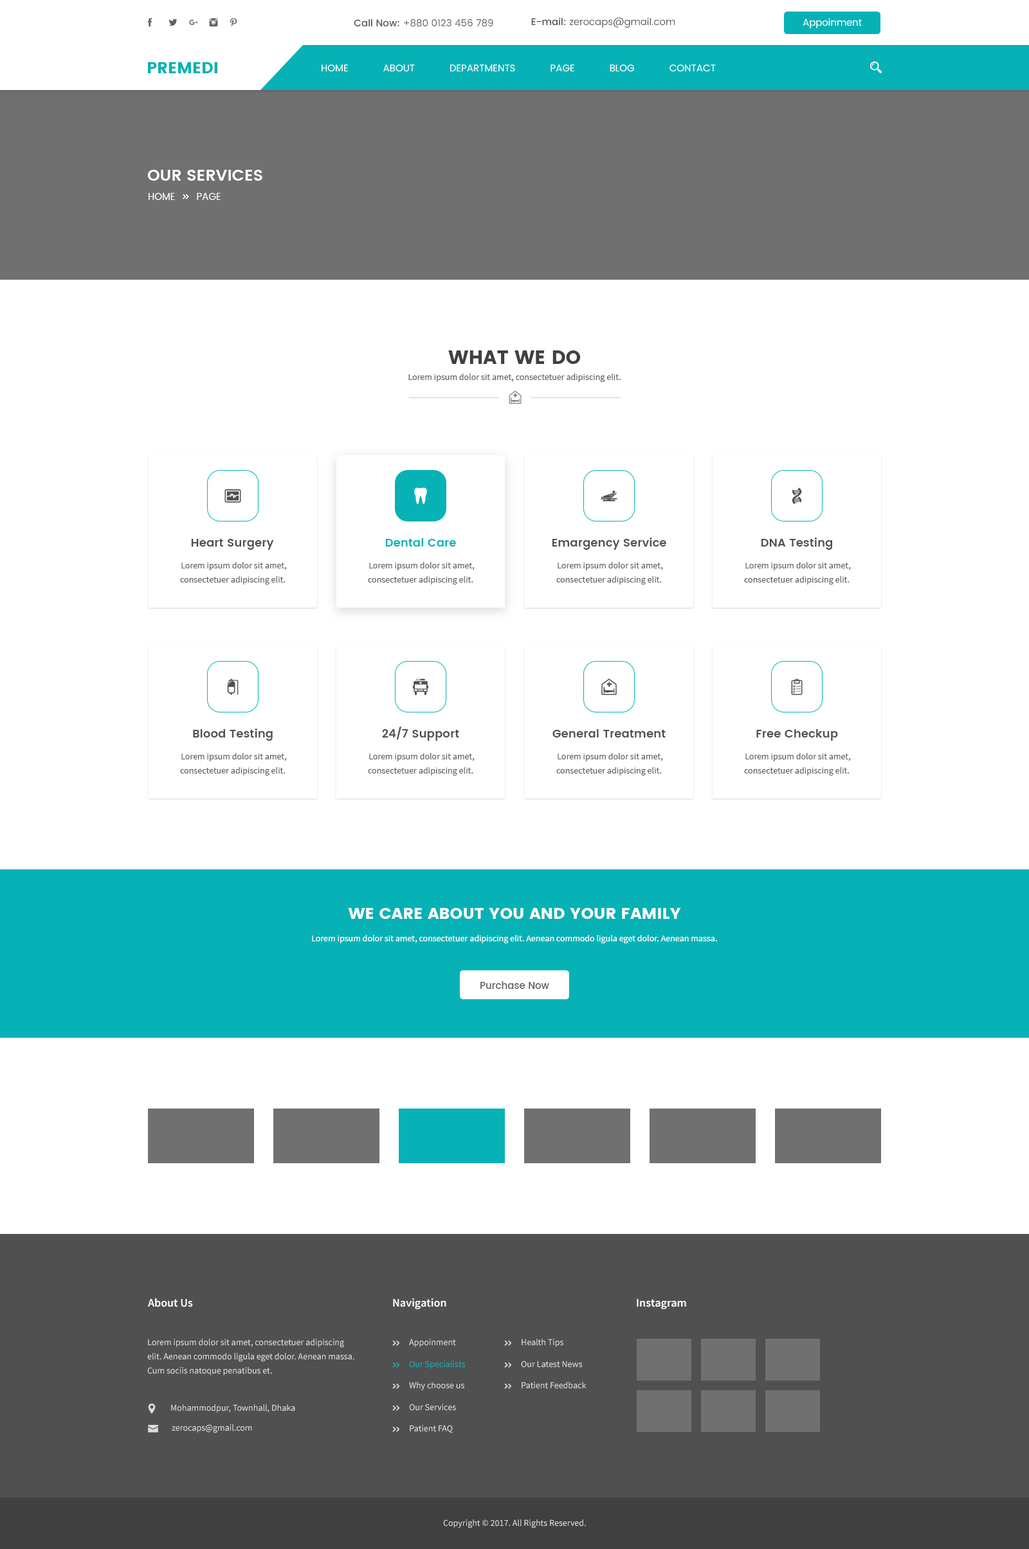
<style>
.page{position:relative;width:1029px;height:1549px;background:#ffffff}
.page>*{position:absolute;margin:0}
.t1{font:9.6px "Poppins-Regular";color:#606060}
.t2{font:9.6px "Poppins-Medium";color:#505050}
.t3{font:9.6px "Poppins-Regular";color:#fffefe}
.t4{font:16.1px "Poppins";color:#06b2b6}
.t5{font:9.6px "Poppins-Regular";color:#ffffff}
.t6{font:16.1px "Poppins-SemiBold";color:#ffffff}
.t7{font:19.3px "Poppins";color:#404040;text-transform:uppercase}
.t8{font:9px "SourceSansPro-Regular";color:#606060}
.t9{font:11.6px "Poppins-SemiBold";color:#505050}
.t10{font:11.6px "Poppins-SemiBold";color:#06b2b6}
.t11{font:9px/14.1px "SourceSansPro-Regular";color:#606060}
.t12{font:16.1px "Poppins";color:#ffffff;text-transform:uppercase}
.t13{font:9px "SourceSansPro-Regular";color:#ffffff}
.t14{font:9.6px "Poppins-Medium";color:#606060}
.t15{font:11.6px "SourceSansPro-Semibold";color:#ffffff}
.t16{font:9px/14.1px "SourceSansPro-Regular";color:#dddddd}
.t17{font:9px "SourceSansPro-Regular";color:#dddddd}
.t18{font:9px "SourceSansPro-Regular";color:#06b2b6}
</style>
<div class="page">
<p class="t1" style="left:531px;top:17px;width:144px;height:11px"><span class="t2">E-mail: </span>zerocaps@gmail.com</p>
<p class="t1" style="left:354px;top:19px;width:139px;height:8px"><span class="t2">Call Now: </span>+880 0123 456 789</p>
<p class="t3" style="left:802px;top:18px;width:59px;height:10px">Appoinment</p>
<p class="t4" style="left:148px;top:62px;width:69px;height:11px">PREMEDI</p>
<p class="t5" style="left:321px;top:64px;width:395px;height:7px">HOME            ABOUT            DEPARTMENTS            PAGE            BLOG            CONTACT</p>
<p class="t6" style="left:147px;top:170px;width:115px;height:11px">OUR SERVICES</p>
<p class="t7" style="left:448px;top:350px;width:132px;height:14px">what we do</p>
<p class="t8" style="left:408px;top:374px;width:212px;height:8px">Lorem ipsum dolor sit amet, consectetuer adipiscing elit.</p>
<p class="t9" style="left:191px;top:539px;width:83px;height:11px">Heart Surgery</p>
<p class="t10" style="left:385px;top:538px;width:71px;height:8px">Dental Care</p>
<p class="t9" style="left:552px;top:537px;width:114px;height:13px">Emargency Service</p>
<p class="t9" style="left:760px;top:537px;width:72px;height:13px">DNA Testing</p>
<p class="t11" style="left:180px;top:562px;width:107px;height:22px;text-align:center">Lorem ipsum dolor sit amet, consectetuer adipiscing elit.</p>
<p class="t11" style="left:368px;top:562px;width:106px;height:22px;text-align:center">Lorem ipsum dolor sit amet, consectetuer adipiscing elit.</p>
<p class="t11" style="left:556px;top:562px;width:107px;height:22px;text-align:center">Lorem ipsum dolor sit amet, consectetuer adipiscing elit.</p>
<p class="t11" style="left:744px;top:562px;width:107px;height:22px;text-align:center">Lorem ipsum dolor sit amet, consectetuer adipiscing elit.</p>
<p class="t9" style="left:193px;top:728px;width:80px;height:13px">Blood Testing</p>
<p class="t9" style="left:382px;top:726px;width:77px;height:15px">24/7 Support</p>
<p class="t9" style="left:552px;top:729px;width:113px;height:8px">General Treatment</p>
<p class="t9" style="left:756px;top:729px;width:82px;height:12px">Free Checkup</p>
<p class="t11" style="left:180px;top:753px;width:107px;height:22px;text-align:center">Lorem ipsum dolor sit amet, consectetuer adipiscing elit.</p>
<p class="t11" style="left:368px;top:753px;width:106px;height:22px;text-align:center">Lorem ipsum dolor sit amet, consectetuer adipiscing elit.</p>
<p class="t11" style="left:556px;top:753px;width:107px;height:22px;text-align:center">Lorem ipsum dolor sit amet, consectetuer adipiscing elit.</p>
<p class="t11" style="left:744px;top:753px;width:107px;height:22px;text-align:center">Lorem ipsum dolor sit amet, consectetuer adipiscing elit.</p>
<p class="t12" style="left:348px;top:908px;width:333px;height:11px">we care about you and your family</p>
<p class="t13" style="left:312px;top:935px;width:405px;height:8px">Lorem ipsum dolor sit amet, consectetuer adipiscing elit. Aenean commodo ligula eget dolor. Aenean massa.</p>
<p class="t14" style="left:480px;top:981px;width:69px;height:8px">Purchase Now</p>
<p class="t15" style="left:148px;top:1298px;width:45px;height:9px">About Us</p>
<p class="t15" style="left:393px;top:1298px;width:53px;height:11px">Navigation</p>
<p class="t15" style="left:636px;top:1299px;width:50px;height:10px">Instagram</p>
<p class="t16" style="left:147px;top:1338px;width:207px;height:37px">Lorem ipsum dolor sit amet, consectetuer adipiscing elit. Aenean commodo ligula eget dolor. Aenean massa. Cum sociis natoque penatibus et.</p>
<p class="t17" style="left:409px;top:1338px;width:47px;height:9px">Appoinment</p>
<p class="t17" style="left:521px;top:1338px;width:42px;height:9px">Health Tips</p>
<p class="t18" style="left:409px;top:1360px;width:56px;height:9px">Our Specialists</p>
<p class="t17" style="left:521px;top:1360px;width:61px;height:7px">Our Latest News</p>
<p class="t17" style="left:409px;top:1382px;width:55px;height:8px">Why choose us</p>
<p class="t17" style="left:521px;top:1382px;width:65px;height:7px">Patient Feedback</p>
<p class="t17" style="left:171px;top:1404px;width:124px;height:8px">Mohammodpur, Townhall, Dhaka</p>
<p class="t17" style="left:409px;top:1403px;width:47px;height:7px">Our Services</p>
<p class="t17" style="left:172px;top:1424px;width:80px;height:9px">zerocaps@gmail.com</p>
<p class="t17" style="left:410px;top:1425px;width:43px;height:8px">Patient FAQ</p>
<p class="t17" style="left:443px;top:1519px;width:143px;height:9px">Copyright © 2017. All Rights Reserved.</p>
</div>
